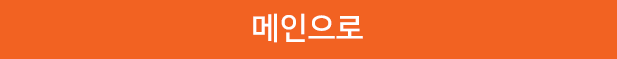
<style>
.page{position:relative;width:617px;height:59px;background:#f26222}
.page>*{position:absolute;margin:0}
.t1{font:31px "NanumSquareB";color:#ffffff}
</style>
<div class="page">
<p class="t1" style="left:253px;top:13px;width:110px;height:30px">메인으로</p>
</div>
